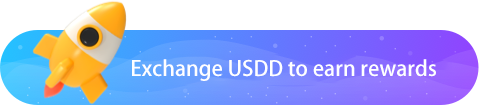
<style>
.page{position:relative;width:479px;height:105px;background:#ffffff}
.page>*{position:absolute;margin:0}
.t1{font:21px "AdobeFanHeitiStd-Bold";color:#ffffff}
</style>
<div class="page">
<p class="t1" style="left:132px;top:59px;width:304px;height:22px">Exchange USDD to earn rewards</p>
</div>
